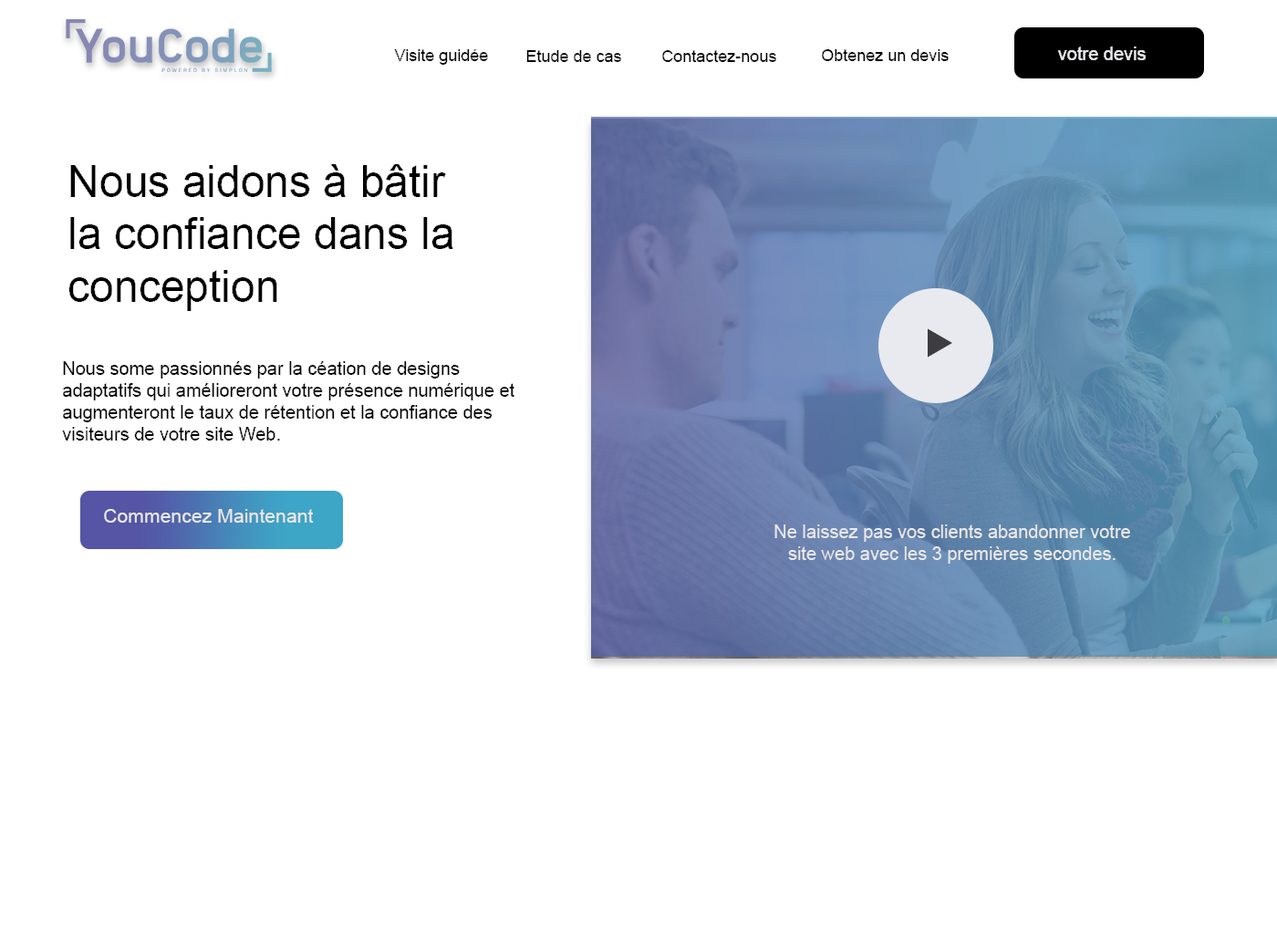
<style>
.page{position:relative;width:1277px;height:934px;background:#ffffff}
.page>*{position:absolute;margin:0}
.t1{font:16.4px "ArialMT";color:#000000}
.t2{font:18.2px "ArialMT";color:#e8eaef}
.t3{font:43.8px "ArialMT";color:#000000}
.t4{font:18.2px "ArialMT";color:#000000}
.t5{font:19.4px "ArialMT";color:#e8eaef}
</style>
<div class="page">
<p class="t1" style="left:394px;top:49px;width:94px;height:16px">Visite guidée</p>
<p class="t1" style="left:526px;top:50px;width:95px;height:12px">Etude de cas</p>
<p class="t1" style="left:662px;top:50px;width:114px;height:12px">Contactez-nous</p>
<p class="t1" style="left:822px;top:49px;width:126px;height:12px">Obtenez un devis</p>
<p class="t2" style="left:1058px;top:47px;width:87px;height:13px">votre devis</p>
<p class="t3" style="left:68px;top:164px;width:385px;height:147px">Nous aidons à bâtir<br>la confiance dans la<br>conception</p>
<p class="t4" style="left:62px;top:361px;width:452px;height:80px">Nous some passionnés par la céation de designs<br>adaptatifs qui amélioreront votre présence numérique et<br>augmenteront le taux de rétention et la confiance des<br>visiteurs de votre site Web.</p>
<p class="t5" style="left:104px;top:509px;width:210px;height:14px">Commencez Maintenant</p>
<p class="t2" style="left:774px;top:524px;width:356px;height:40px;text-align:center">Ne laissez pas vos clients abandonner votre<br>site web avec les 3 premières secondes.</p>
</div>
